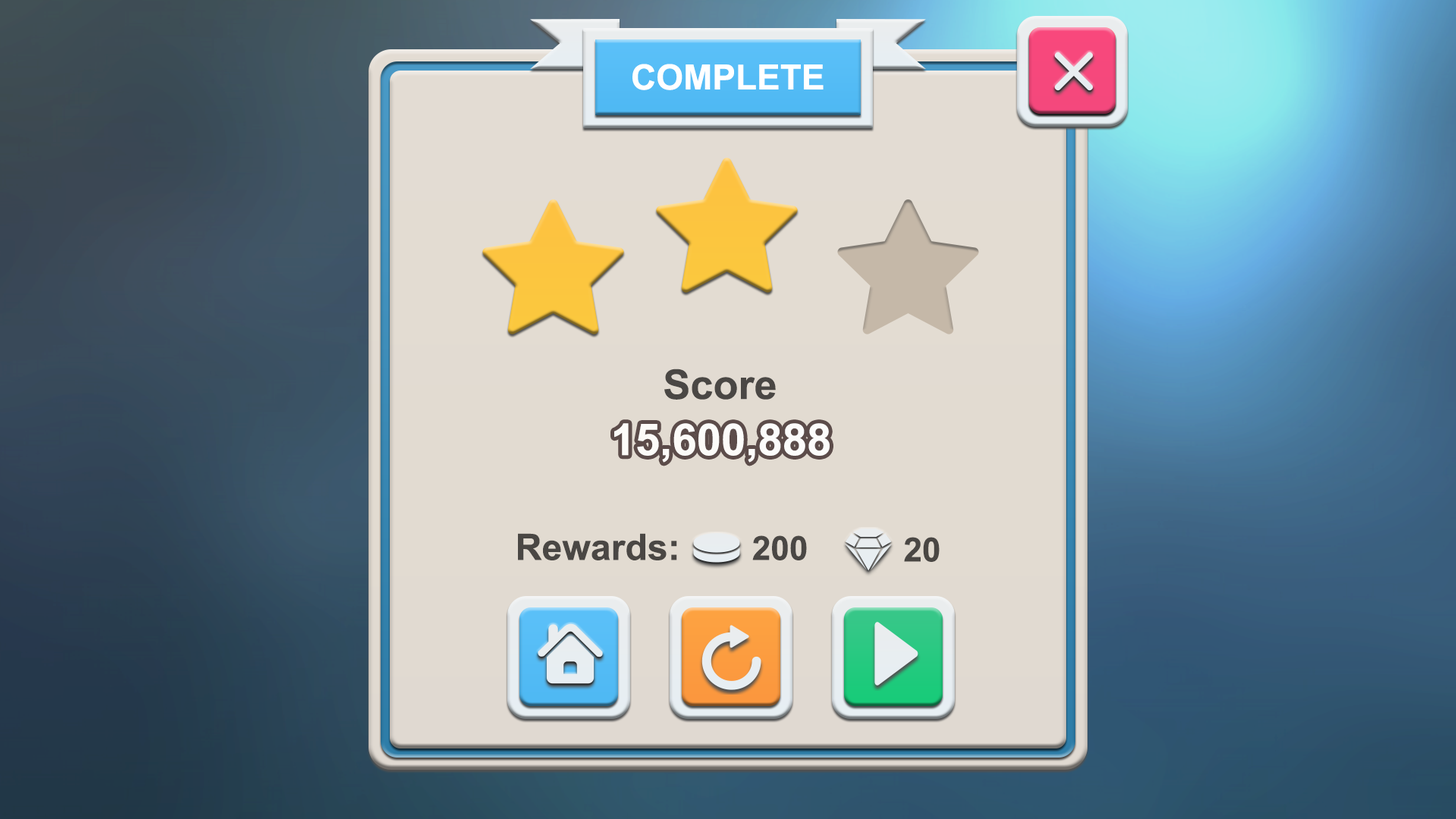
<style>
.page{position:relative;width:1456px;height:819px}
.page>*{position:absolute;margin:0}
.t1{font:34.9px "Arial-BoldMT";color:#ffffff}
.t2{font:40.9px "Arial-BoldMT";color:#4a4744}
.t3{font:44px "Arial-BoldMT";color:#ffffff}
.t4{font:36.4px "Arial-BoldMT";color:#4a4744}
.t5{font:33.4px "Arial-BoldMT";color:#4a4744}
</style>
<div class="page">
<p class="t1" style="left:632px;top:64px;width:192px;height:26px">COMPLETE</p>
<p class="t2" style="left:664px;top:369px;width:112px;height:31px">Score</p>
<p class="t3" style="left:614px;top:423px;width:216px;height:40px">15,600,888</p>
<p class="t4" style="left:518px;top:533px;width:159px;height:27px">Rewards:</p>
<p class="t5" style="left:752px;top:535px;width:55px;height:25px">200</p>
<p class="t5" style="left:904px;top:537px;width:36px;height:25px">20</p>
</div>
